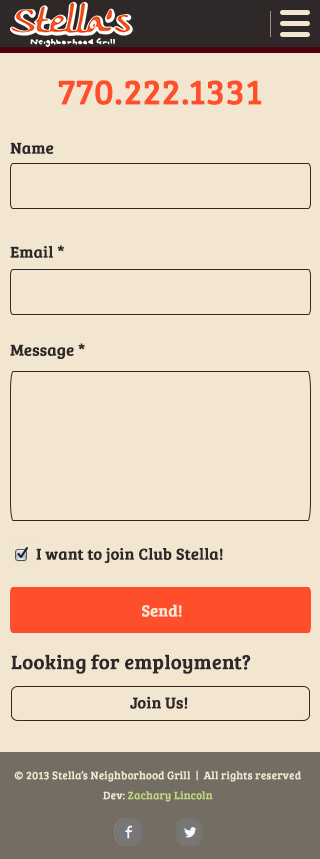
<style>
.page{position:relative;width:320px;height:859px;background:#f3e6d0}
.page>*{position:absolute;margin:0}
.t1{font:36px "BreeSerif-Regular";color:#ff4e2c;font-weight:bold}
.t2{font:16px "BreeSerif-Regular";color:#2e2828;font-weight:bold}
.t3{font:16px "BreeSerif-Regular";color:#f3e6d0;font-weight:bold}
.t4{font:20px "BreeSerif-Regular";color:#2e2828;font-weight:bold}
.t5{font:11px/20px "BreeSerif-Regular";color:#f3e6d0;font-weight:bold}
.t6{font:11px/20px "BreeSerif-Regular";color:#c5d580;font-weight:bold}
</style>
<div class="page">
<p class="t1" style="left:58px;top:80px;width:204px;height:25px">770.222.1331</p>
<p class="t2" style="left:10px;top:142px;width:44px;height:12px">Name</p>
<p class="t2" style="left:10px;top:245px;width:54px;height:13px">Email *</p>
<p class="t2" style="left:10px;top:343px;width:75px;height:16px">Message *</p>
<p class="t2" style="left:36px;top:548px;width:187px;height:15px">I want to join Club Stella!</p>
<p class="t3" style="left:142px;top:604px;width:40px;height:13px">Send!</p>
<p class="t4" style="left:11px;top:654px;width:240px;height:20px">Looking for employment?</p>
<p class="t2" style="left:130px;top:696px;width:58px;height:13px">Join Us!</p>
<p class="t5" style="left:14px;top:770px;width:287px;height:32px;text-align:center">© 2013 Stella’s Neighborhood Grill  |  All rights reserved<br>Dev: <span class="t6">Zachary Lincoln</span></p>
</div>
